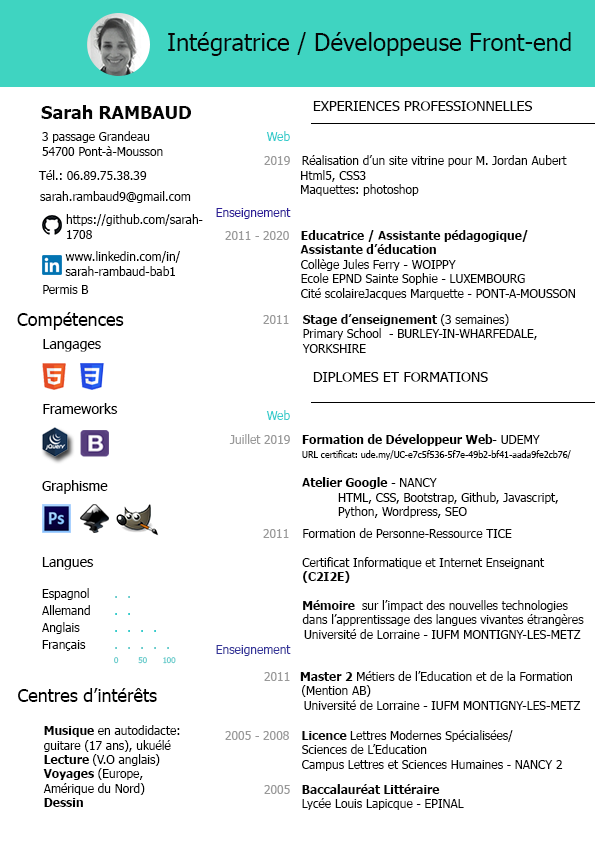
<style>
.page{position:relative;width:595px;height:842px;background:#ffffff}
.page>*{position:absolute;margin:0}
.t1{font:24px "Tahoma";color:#060606}
.t2{font:14px "Tahoma";color:#050505}
.t3{font:18px "Tahoma-Bold";color:#050505}
.t4{font:12px "Tahoma";color:#000000}
.t5{font:12px "Tahoma";color:#33cccc}
.t6{font:12px "Tahoma";color:#999999}
.t7{font:12px "Tahoma";color:#050505}
.t8{font:12px "Tahoma";color:#2b1c97}
.t9{font:12.1px "Tahoma";color:#000000}
.t10{font:12px "Tahoma-Bold";color:#050505}
.t11{font:18px "Tahoma";color:#000000}
.t12{font:14px "Tahoma";color:#000000}
.t13{font:12px "Tahoma-Bold";color:#000000}
.t14{font:9px "Tahoma";color:#000000}
.t15{font:8px "Tahoma";color:#66cccc}
.t16{font:14px "Tahoma";color:#66cccc}
.t17{font:14px "Tahoma";color:#33cccc}
.t18{font:12px "Tahoma";color:#333399}
</style>
<div class="page">
<p class="t1" style="left:168px;top:32px;width:403px;height:24px">Intégratrice / Développeuse Front-end</p>
<p class="t2" style="left:313px;top:101px;width:220px;height:10px">EXPERIENCES PROFESSIONNELLES</p>
<p class="t3" style="left:41px;top:105px;width:150px;height:14px">Sarah RAMBAUD</p>
<p class="t4" style="left:42px;top:131px;width:121px;height:25px">3 passage Grandeau<br>54700 Pont-à-Mousson</p>
<p class="t5" style="left:266px;top:131px;width:24px;height:10px">Web</p>
<p class="t6" style="left:264px;top:156px;width:26px;height:9px">2019</p>
<p class="t7" style="left:301px;top:155px;width:266px;height:41px">Réalisation d’un site vitrine pour M. Jordan Aubert<br> Html5, CSS3<br> Maquettes: photoshop</p>
<p class="t7" style="left:38px;top:170px;width:109px;height:10px">Tél.: 06.89.75.38.39</p>
<p class="t7" style="left:40px;top:191px;width:151px;height:12px">sarah.rambaud9@gmail.com</p>
<p class="t8" style="left:216px;top:208px;width:75px;height:11px">Enseignement</p>
<p class="t9" style="left:66px;top:214px;width:137px;height:25px">https://github.com/sarah-1708</p>
<p class="t6" style="left:225px;top:231px;width:64px;height:9px">2011 - 2020</p>
<p class="t7" style="left:300px;top:230px;width:275px;height:70px"><span class="t10">Educatrice / Assistante pédagogique/ <br>   Assistante d’éducation <br></span>   Collège Jules Ferry - WOIPPY<br>   Ecole EPND Sainte Sophie - LUXEMBOURG<br>   Cité scolaireJacques Marquette - PONT-A-MOUSSON</p>
<p class="t4" style="left:65px;top:251px;width:115px;height:25px">www.linkedin.com/in/sarah-rambaud-bab119189</p>
<p class="t4" style="left:43px;top:285px;width:46px;height:9px">Permis B</p>
<p class="t11" style="left:17px;top:312px;width:107px;height:18px">Compétences</p>
<p class="t6" style="left:263px;top:315px;width:26px;height:9px">2011</p>
<p class="t7" style="left:302px;top:314px;width:235px;height:39px"><span class="t10">Stage d’enseignement </span>(3 semaines)<br>  Primary School  - BURLEY-IN-WHARFEDALE, <br>  YORKSHIRE</p>
<p class="t12" style="left:43px;top:339px;width:58px;height:13px">Langages</p>
<p class="t2" style="left:313px;top:372px;width:175px;height:10px">DIPLOMES ET FORMATIONS</p>
<p class="t12" style="left:43px;top:403px;width:75px;height:11px">Frameworks</p>
<p class="t5" style="left:266px;top:410px;width:24px;height:10px">Web</p>
<p class="t6" style="left:229px;top:434px;width:61px;height:10px">Juillet 2019</p>
<p class="t4" style="left:302px;top:434px;width:269px;height:84px"><span class="t13">Formation de Développeur Web</span>- UDEMY<br>  <span class="t14">URL certificat: ude.my/UC-e7c5f536-5f7e-49b2-bf41-aada9fe2cb76/   <br>          <br>  </span><span class="t13">Atelier Google</span> - NANCY<br>   HTML, CSS, Bootstrap, Github, Javascript, <br>   Python, Wordpress, SEO</p>
<p class="t12" style="left:42px;top:480px;width:66px;height:14px">Graphisme</p>
<p class="t6" style="left:263px;top:529px;width:26px;height:9px">2011</p>
<p class="t7" style="left:302px;top:528px;width:282px;height:111px">Formation de Personne-Ressource TICE <br><br>  Certificat Informatique et Internet Enseignant <br>  <span class="t10">(C2I2E)<br><br>  Mémoire  </span>sur l’impact des nouvelles technologies<br>  dans l’apprentissage des langues vivantes étrangères <br>           Université de Lorraine - IUFM MONTIGNY-LES-METZ</p>
<p class="t15" style="left:42px;top:557px;width:134px;height:107px"><span class="t12">Langues<br></span><span class="t4"><br>Espagnol  </span><span class="t16">.  .<br></span><span class="t4">Allemand  </span><span class="t17">.  .<br></span><span class="t4">Anglais </span><span class="t17">.  .  .  .<br></span><span class="t4">Français </span><span class="t16">.  .  .  .  .<br>  </span>0        50      100</p>
<p class="t18" style="left:216px;top:645px;width:75px;height:11px">Enseignement</p>
<p class="t6" style="left:264px;top:672px;width:26px;height:9px">2011</p>
<p class="t7" style="left:300px;top:671px;width:281px;height:39px"><span class="t10">Master 2</span> Métiers de l’Education et de la Formation<br>          (Mention AB)<br>  Université de Lorraine - IUFM MONTIGNY-LES-METZ</p>
<p class="t4" style="left:18px;top:688px;width:162px;height:119px"><span class="t11">Centres d’intérêts<br><br>      </span><span class="t13">Musique </span>en autodidacte:<br>       guitare (17 ans), ukuélé<br>       <span class="t13">Lecture </span>(V.O anglais)<br>       <span class="t13">Voyages </span>(Europe, <br>       Amérique du Nord)<br>       <span class="t13">Dessin</span></p>
<p class="t6" style="left:225px;top:731px;width:64px;height:9px">2005 - 2008</p>
<p class="t7" style="left:302px;top:730px;width:261px;height:41px"><span class="t10">  Licence </span>Lettres Modernes Spécialisées/ <br>   Sciences de L’Education<br>   Campus Lettres et Sciences Humaines - NANCY 2</p>
<p class="t6" style="left:264px;top:785px;width:26px;height:9px">2005</p>
<p class="t7" style="left:302px;top:784px;width:162px;height:26px"><span class="t10">Baccalauréat Littéraire<br></span>  Lycée Louis Lapicque - EPINAL</p>
</div>
